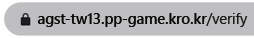
<style>
.page{position:relative;width:254px;height:38px;background:#bfbfc1}
.page>*{position:absolute;margin:0}
.t1{font:14.6px "SegoeUI-Semibold";color:#0a0a0a}
.t2{font:14.6px "SegoeUI";color:#1b1b1c}
</style>
<div class="page">
<p class="t1" style="left:37px;top:13px;width:211px;height:14px">agst-tw13.pp-game.kro.kr<span class="t2">/verify</span></p>
</div>
